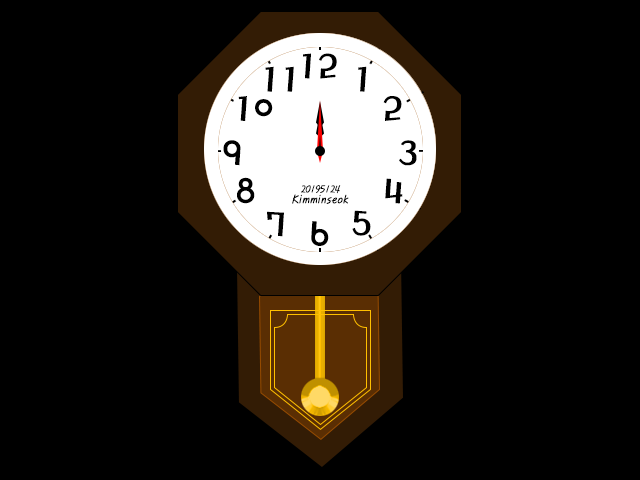
<style>
.page{position:relative;width:640px;height:480px;background:#000000}
.page>*{position:absolute;margin:0}
.t1{font:36px "MagicR-HM";color:#000000}
.t2{font:10px "PyunjiR-HM";color:#000000}
.t3{font:12px "PyunjiR-HM";color:#000000}
</style>
<div class="page">
<p class="t1" style="left:303px;top:53px;width:34px;height:26px">12</p>
<p class="t1" style="left:265px;top:66px;width:29px;height:26px">11</p>
<p class="t1" style="left:358px;top:66px;width:9px;height:26px">1</p>
<p class="t1" style="left:238px;top:96px;width:35px;height:25px">10</p>
<p class="t1" style="left:383px;top:96px;width:19px;height:25px">2</p>
<p class="t1" style="left:223px;top:140px;width:18px;height:26px">9</p>
<p class="t1" style="left:399px;top:140px;width:18px;height:26px">3</p>
<p class="t1" style="left:237px;top:177px;width:18px;height:27px">8</p>
<p class="t2" style="left:301px;top:185px;width:40px;height:9px">20195124</p>
<p class="t1" style="left:385px;top:178px;width:18px;height:26px">4</p>
<p class="t3" style="left:292px;top:194px;width:57px;height:10px">Kimminseok</p>
<p class="t1" style="left:267px;top:211px;width:17px;height:26px">7</p>
<p class="t1" style="left:311px;top:221px;width:18px;height:25px">6</p>
<p class="t1" style="left:352px;top:210px;width:19px;height:26px">5</p>
</div>
